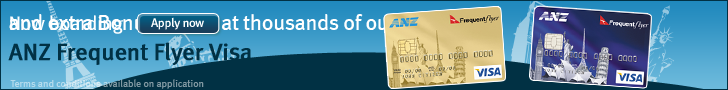
<style>
.page{position:relative;width:728px;height:90px}
.page>*{position:absolute;margin:0}
.t1{font:24px/30px "MetaBookLF-Roman";letter-spacing:-0.015em;color:#013144;font-weight:bold}
.t2{font:20px/30px "MetaBookLF-Roman";letter-spacing:-0.015em;color:#ffffff}
.t3{font:22px "MetaBookLF-Roman";letter-spacing:-0.015em;color:#ffffff}
.t4{font:12.6px "MetaMediumLF-Roman";letter-spacing:-0.025em;color:#ffffff}
.t5{font:10px "MetaBookLF-Roman"}
</style>
<div class="page">
<p class="t1" style="left:8px;top:15px;width:244px;height:50px"><span class="t2">Now boarding<br></span>ANZ Frequent Flyer Visa</p>
<p class="t3" style="left:9px;top:14px;width:424px;height:20px">and extra Bonus points at thousands of outlets.</p>
<p class="t4" style="left:151px;top:17px;width:53px;height:13px">Apply now</p>
<p class="t5" style="left:10px;top:79px;width:194px;height:10px">Terms and conditions available on application</p>
</div>
